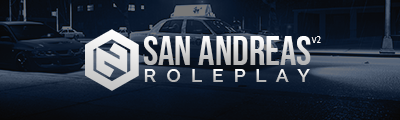
<style>
.page{position:relative;width:400px;height:120px}
.page>*{position:absolute;margin:0}
.t1{font:40.6px "BebasNeue-Regular"}
.t2{font:8.7px "Beval-Light";letter-spacing:0.04em;color:#ffffff}
.t3{font:19.3px "Raleway-SemiBold";letter-spacing:0.134em}
</style>
<div class="page">
<p class="t1" style="left:143px;top:36px;width:168px;height:29px">SAN ANDREAS</p>
<p class="t2" style="left:311px;top:36px;width:10px;height:7px">V2</p>
<p class="t3" style="left:144px;top:69px;width:166px;height:13px">R O L E P L A Y</p>
</div>
